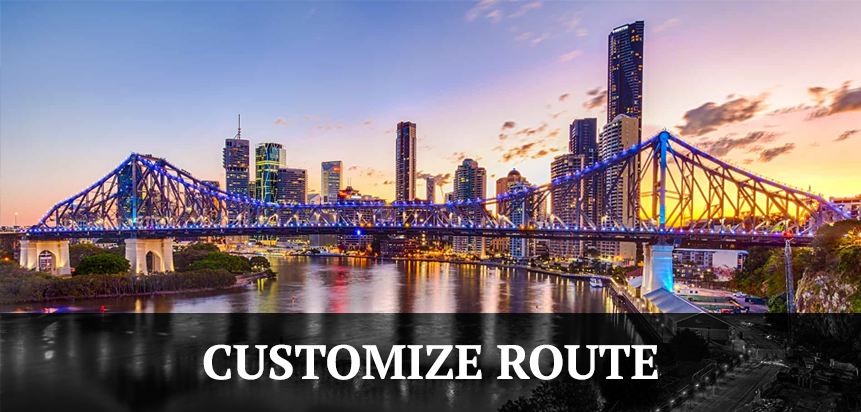
<style>
.page{position:relative;width:861px;height:412px}
.page>*{position:absolute;margin:0}
.t1{font:48px "PTSerif-Bold";color:#ffffff}
</style>
<div class="page">
<p class="t1" style="left:203px;top:344px;width:455px;height:36px">CUSTOMIZE ROUTE</p>
</div>
